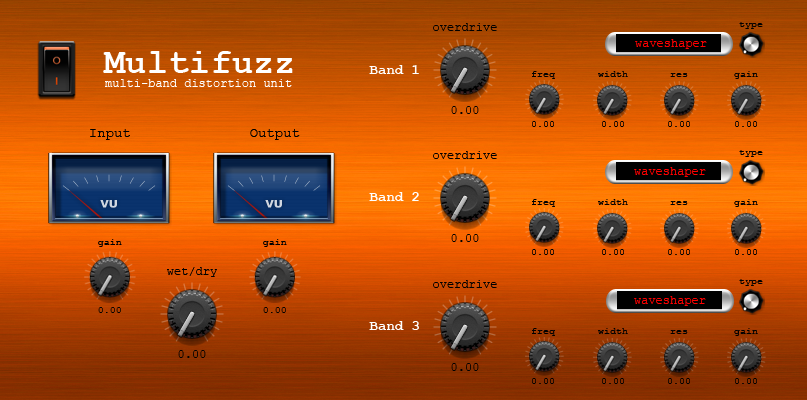
<style>
.page{position:relative;width:807px;height:400px}
.page>*{position:absolute;margin:0}
.t1{font:12px "CourierNewPSMT";color:#000000}
.t2{font:10px "CourierNewPSMT";color:#000000}
.t3{font:12px "CourierNewPSMT";color:#ff0000}
.t4{font:14px "CourierNewPS-BoldMT";color:#ffffff}
.t5{font:14px "CourierNewPSMT";color:#000000}
</style>
<div class="page">
<p class="t1" style="left:433px;top:23px;width:64px;height:8px">overdrive</p>
<p class="t2" style="left:739px;top:22px;width:24px;height:7px">type</p>
<p class="t3" style="left:635px;top:39px;width:72px;height:10px">waveshaper</p>
<p class="t4" style="left:369px;top:65px;width:50px;height:9px">Band 1</p>
<p class="t2" style="left:532px;top:71px;width:23px;height:8px">freq</p>
<p class="t2" style="left:598px;top:71px;width:30px;height:6px">width</p>
<p class="t2" style="left:670px;top:73px;width:18px;height:4px">res</p>
<p class="t2" style="left:734px;top:71px;width:24px;height:8px">gain</p>
<p class="t1" style="left:451px;top:106px;width:28px;height:8px">0.00</p>
<p class="t2" style="left:532px;top:121px;width:22px;height:6px">0.00</p>
<p class="t2" style="left:602px;top:121px;width:22px;height:6px">0.00</p>
<p class="t2" style="left:668px;top:121px;width:22px;height:6px">0.00</p>
<p class="t2" style="left:735px;top:121px;width:22px;height:6px">0.00</p>
<p class="t5" style="left:90px;top:129px;width:40px;height:11px">Input</p>
<p class="t5" style="left:250px;top:129px;width:50px;height:11px">Output</p>
<p class="t2" style="left:739px;top:150px;width:24px;height:7px">type</p>
<p class="t1" style="left:433px;top:151px;width:64px;height:8px">overdrive</p>
<p class="t3" style="left:634px;top:167px;width:72px;height:10px">waveshaper</p>
<p class="t4" style="left:369px;top:192px;width:50px;height:9px">Band 2</p>
<p class="t2" style="left:532px;top:199px;width:23px;height:8px">freq</p>
<p class="t2" style="left:598px;top:199px;width:30px;height:6px">width</p>
<p class="t2" style="left:670px;top:201px;width:18px;height:4px">res</p>
<p class="t2" style="left:734px;top:199px;width:24px;height:8px">gain</p>
<p class="t2" style="left:98px;top:239px;width:24px;height:8px">gain</p>
<p class="t2" style="left:263px;top:239px;width:24px;height:8px">gain</p>
<p class="t1" style="left:451px;top:234px;width:28px;height:8px">0.00</p>
<p class="t2" style="left:532px;top:249px;width:22px;height:6px">0.00</p>
<p class="t2" style="left:602px;top:249px;width:22px;height:6px">0.00</p>
<p class="t2" style="left:668px;top:249px;width:22px;height:6px">0.00</p>
<p class="t2" style="left:735px;top:249px;width:22px;height:6px">0.00</p>
<p class="t1" style="left:433px;top:280px;width:64px;height:8px">overdrive</p>
<p class="t2" style="left:739px;top:279px;width:24px;height:7px">type</p>
<p class="t3" style="left:634px;top:296px;width:72px;height:10px">waveshaper</p>
<p class="t2" style="left:98px;top:307px;width:23px;height:6px">0.00</p>
<p class="t2" style="left:263px;top:307px;width:23px;height:6px">0.00</p>
<p class="t4" style="left:369px;top:321px;width:50px;height:9px">Band 3</p>
<p class="t2" style="left:532px;top:328px;width:23px;height:8px">freq</p>
<p class="t2" style="left:598px;top:328px;width:30px;height:6px">width</p>
<p class="t2" style="left:734px;top:328px;width:24px;height:8px">gain</p>
<p class="t2" style="left:670px;top:330px;width:18px;height:4px">res</p>
<p class="t1" style="left:451px;top:363px;width:28px;height:8px">0.00</p>
<p class="t2" style="left:532px;top:378px;width:22px;height:6px">0.00</p>
<p class="t2" style="left:602px;top:378px;width:22px;height:6px">0.00</p>
<p class="t2" style="left:668px;top:378px;width:22px;height:6px">0.00</p>
<p class="t2" style="left:735px;top:378px;width:22px;height:6px">0.00</p>
</div>
